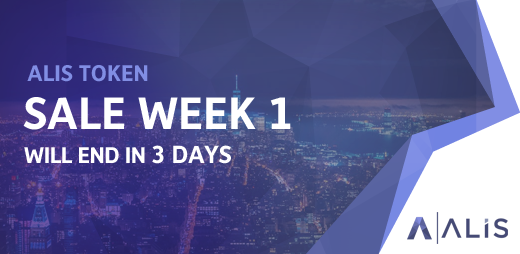
<style>
.page{position:relative;width:520px;height:254px}
.page>*{position:absolute;margin:0}
.t1{font:23px "Depot-Bold";color:#818ee4;text-transform:uppercase}
.t2{font:46px "Depot-Bold";color:#ffffff;text-transform:uppercase}
.t3{font:23px "Depot-Bold";letter-spacing:-0.02em;color:#ffffff;text-transform:uppercase}
.t4{font:25px "Depot-Bold";letter-spacing:-0.02em;color:#ffffff;text-transform:uppercase}
</style>
<div class="page">
<p class="t1" style="left:27px;top:65px;width:121px;height:17px">ALIS TOKEN</p>
<p class="t2" style="left:23px;top:97px;width:268px;height:33px">SALE week 1</p>
<p class="t3" style="left:24px;top:145px;width:207px;height:19px">will end in <span class="t4">3 days</span></p>
</div>
